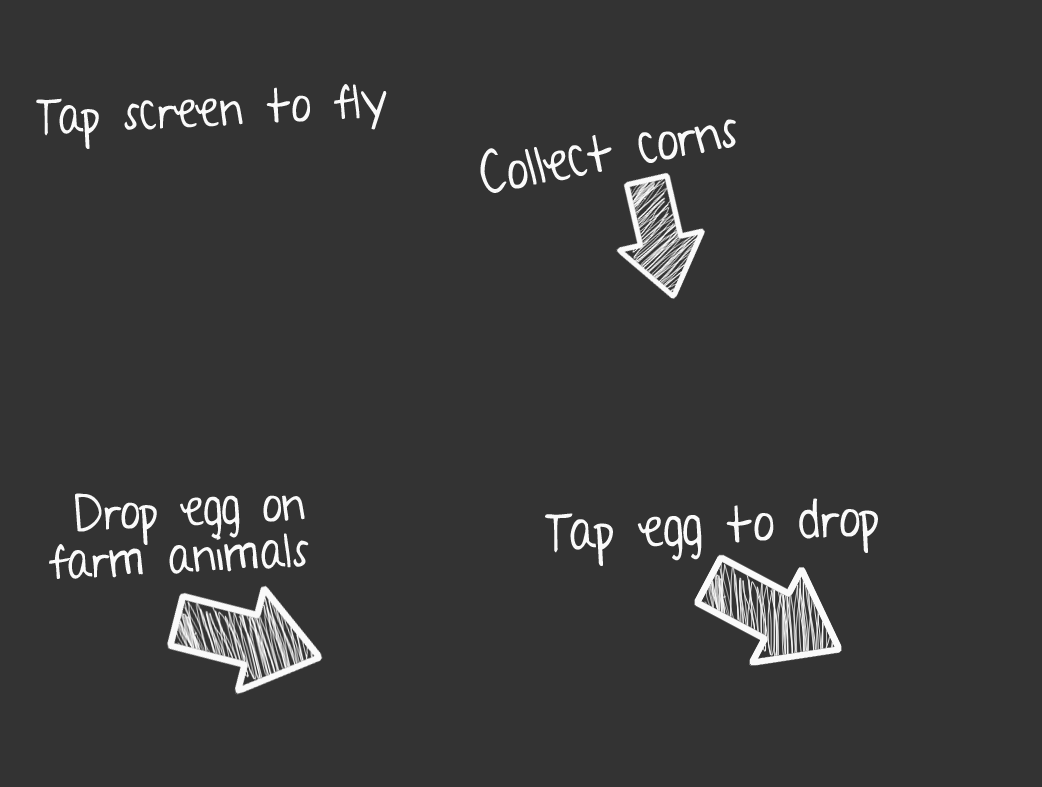
<style>
.page{position:relative;width:1042px;height:787px;background:#333333}
.page>*{position:absolute;margin:0}
.t1{font:46.7px "AYearWithoutRain";color:#fafafa}
.t2{font:50.4px "AYearWithoutRain";color:#fafafa}
.t3{font:46.7px/46.5px "AYearWithoutRain";color:#fafafa}
.t4{font:49.7px "AYearWithoutRain";color:#fafafa}
</style>
<div class="page">
<p class="t1" style="left:36px;top:84px;width:351px;height:65px;rotate:-3deg">Tap screen to fly</p>
<p class="t2" style="left:480px;top:119px;width:256px;height:74px;rotate:-11deg">Collect corns</p>
<p class="t3" style="left:49px;top:493px;width:260px;height:86px;text-align:right;rotate:-3deg">Drop egg on<br>farm animals</p>
<p class="t4" style="left:545px;top:498px;width:333px;height:68px;rotate:-3deg">Tap egg to drop</p>
</div>
